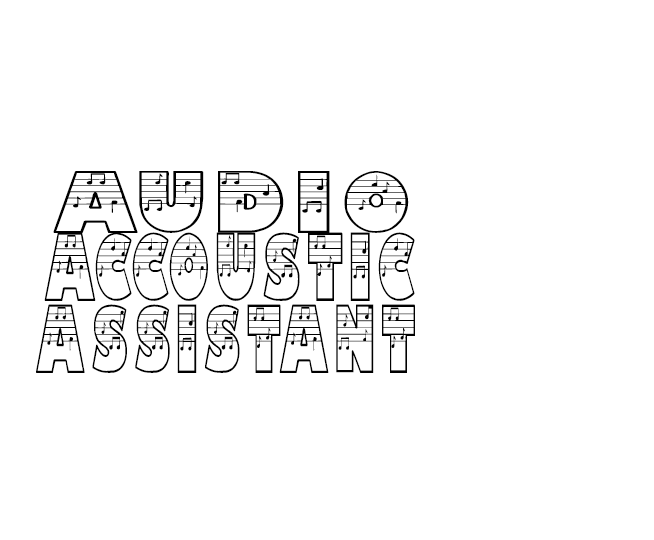
<style>
.page{position:relative;width:654px;height:540px;background:#ffffff}
.page>*{position:absolute;margin:0}
.t1{font:61.9px "DTNoted";letter-spacing:0.08em;color:#000000;scale:1.38 1}
.t2{font:68.3px "DTNoted";letter-spacing:0.08em;color:#000000;scale:0.75 1}
.t3{font:68.3px "DTNoted";letter-spacing:0.08em;color:#000000;scale:0.72 1}
</style>
<div class="page">
<p class="t1" style="left:53px;top:171px;width:356px;height:62px">Audio</p>
<p class="t2" style="left:44px;top:232px;width:371px;height:69px">Accoustic</p>
<p class="t3" style="left:36px;top:304px;width:379px;height:69px">Assistant</p>
</div>
